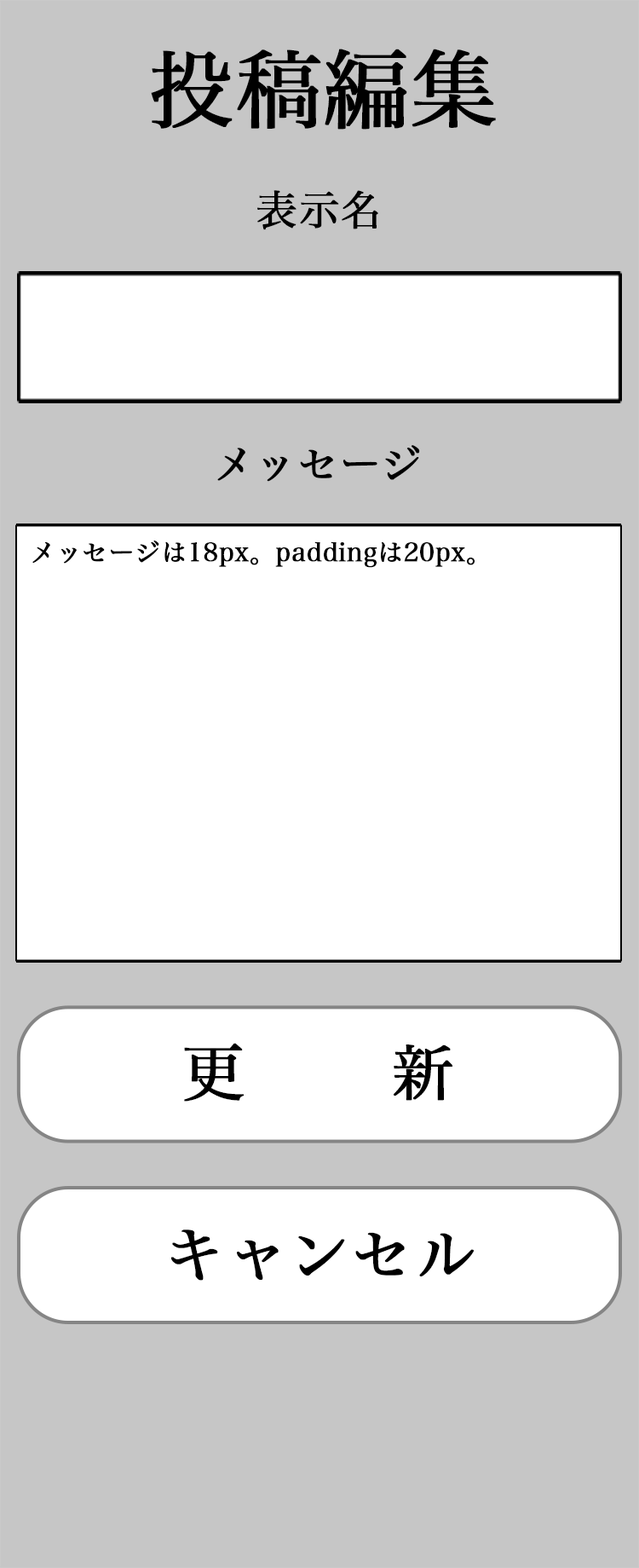
<style>
.page{position:relative;width:639px;height:1568px;background:#c6c6c6}
.page>*{position:absolute;margin:0}
.t1{font:85.3px "HiraMinPro-W3";color:#000000;font-weight:bold}
.t2{font:40.9px "HiraMinPro-W3";color:#000000;font-weight:bold}
.t3{font:25.6px "HiraMinPro-W3";color:#000000;font-weight:bold}
.t4{font:61.4px "HiraMinPro-W3";color:#000000;font-weight:bold}
</style>
<div class="page">
<p class="t1" style="left:151px;top:49px;width:345px;height:81px">投稿編集</p>
<p class="t2" style="left:257px;top:190px;width:122px;height:40px">表示名</p>
<p class="t2" style="left:217px;top:445px;width:203px;height:37px">メッセージ</p>
<p class="t3" style="left:32px;top:541px;width:443px;height:27px">メッセージは18px。paddingは20px。</p>
<p class="t4" style="left:184px;top:1043px;width:269px;height:59px">更新</p>
<p class="t4" style="left:171px;top:1230px;width:304px;height:51px">キャンセル</p>
</div>
